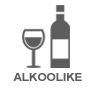
<style>
.page{position:relative;width:93px;height:90px;background:#ffffff}
.page>*{position:absolute;margin:0}
.t1{font:11px "Arial-BoldMT";color:#5e5d5d;text-transform:uppercase;scale:1.07 1}
</style>
<div class="page">
<p class="t1" style="left:13px;top:73px;width:69px;height:8px">Alkoolike</p>
</div>
